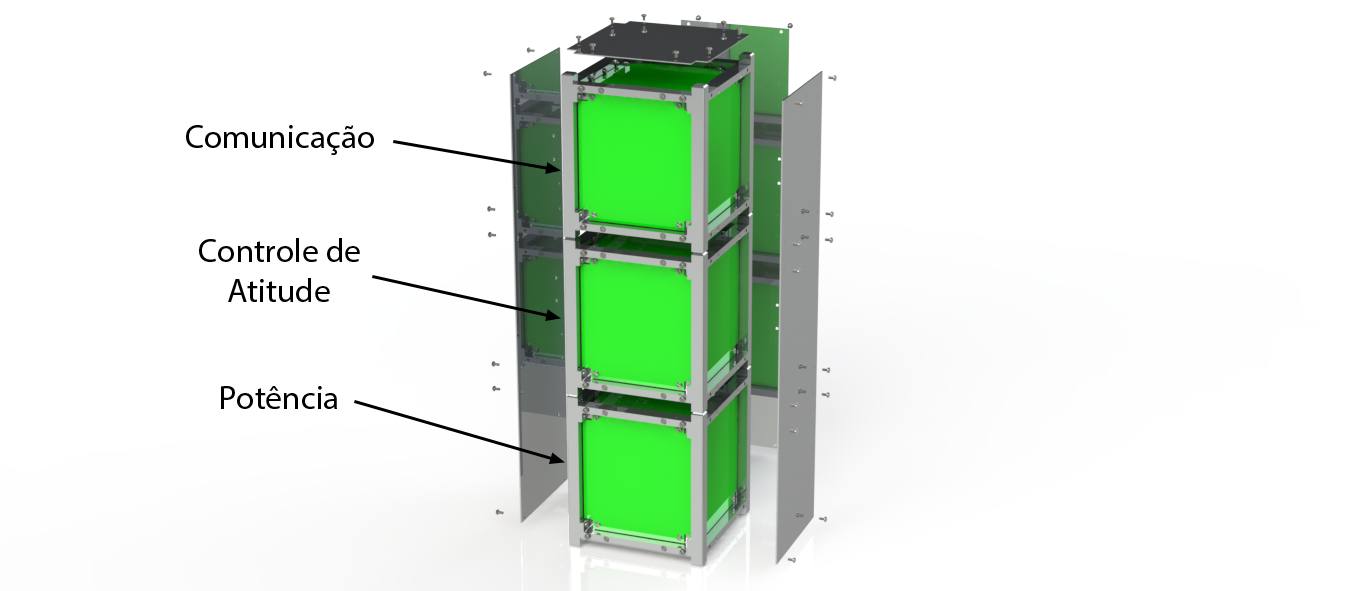
<style>
.page{position:relative;width:1366px;height:591px;background:#ffffff}
.page>*{position:absolute;margin:0}
.t1{font:33.3px "MyriadPro-Regular";color:#000000}
</style>
<div class="page">
<p class="t1" style="left:186px;top:125px;width:188px;height:30px">Comunicação</p>
<p class="t1" style="left:199px;top:238px;width:161px;height:64px">Controle de <br>    Atitude</p>
<p class="t1" style="left:221px;top:386px;width:116px;height:23px">Potência</p>
</div>
